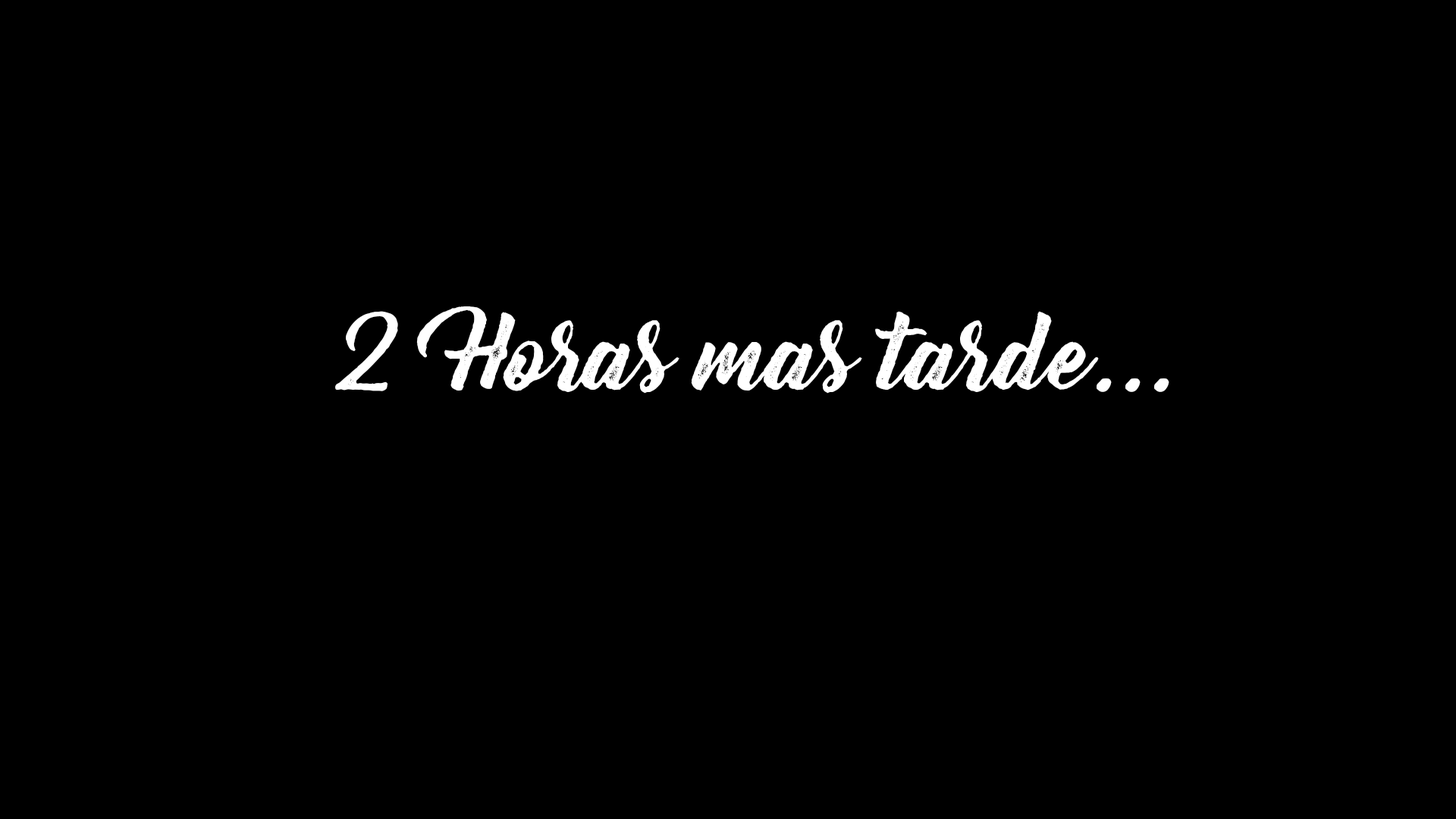
<style>
.page{position:relative;width:1456px;height:819px;background:#000000}
.page>*{position:absolute;margin:0}
.t1{font:95.2px "BernadetteRough";color:#ffffff}
</style>
<div class="page">
<p class="t1" style="left:335px;top:306px;width:834px;height:88px">2  Horas mas tarde...</p>
</div>
